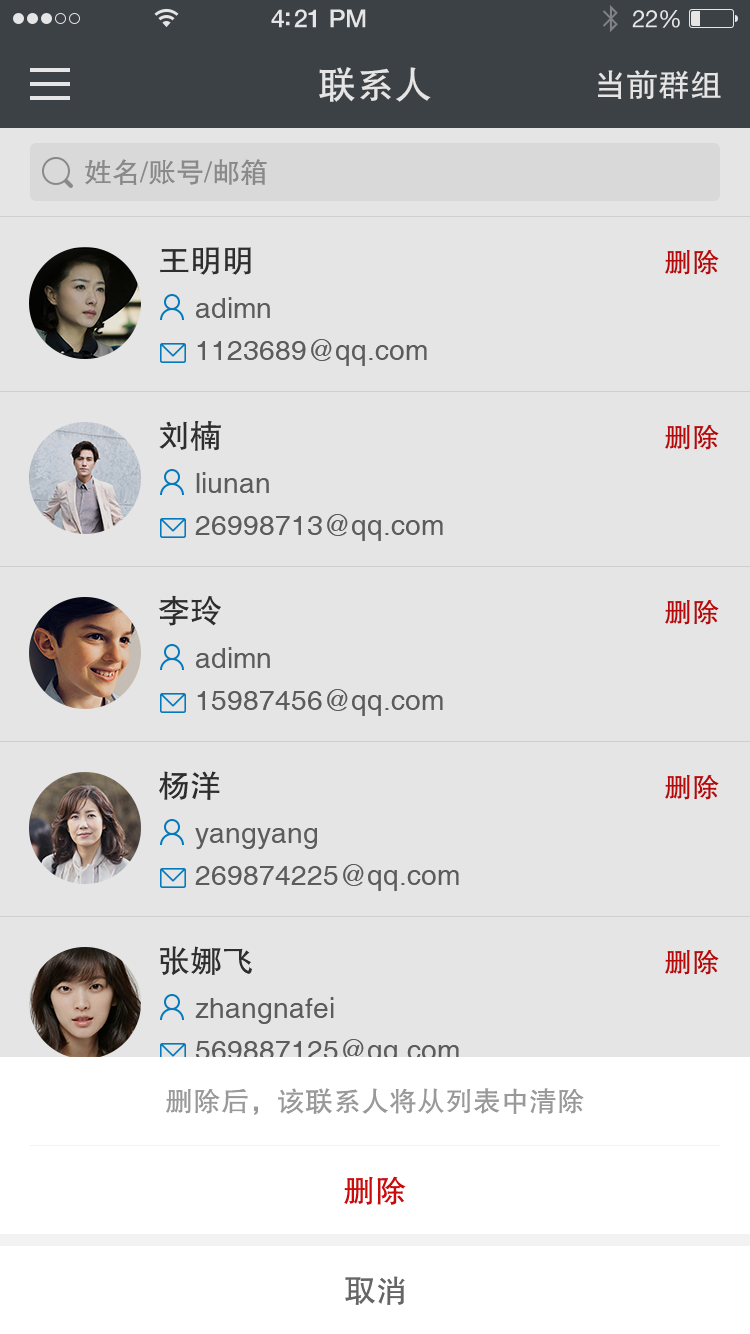
<style>
.page{position:relative;width:750px;height:1334px;background:#e5e5e5}
.page>*{position:absolute;margin:0}
.t1{font:38px "FZHTJW--GB1-0";color:#e5e5e5}
.t2{font:32px "FZHTJW--GB1-0";color:#e5e5e5}
.t3{font:28px "FZHTJW--GB1-0";color:#999999}
.t4{font:32px "FZHTJW--GB1-0";color:#333333}
.t5{font:28px "FZHTJW--GB1-0";color:#cc0a0a}
.t6{font:28px "Helvetica";color:#666666}
.t7{font:32px "FZHTJW--GB1-0";color:#cc0a0a}
.t8{font:32px "FZHTJW--GB1-0";color:#666666}
</style>
<div class="page">
<p class="t1" style="left:319px;top:67px;width:112px;height:35px">联系人</p>
<p class="t2" style="left:598px;top:70px;width:123px;height:29px">当前群组</p>
<p class="t3" style="left:85px;top:159px;width:182px;height:26px">姓名/账号/邮箱</p>
<p class="t4" style="left:160px;top:247px;width:91px;height:28px">王明明</p>
<p class="t5" style="left:665px;top:249px;width:54px;height:26px">删除</p>
<p class="t6" style="left:196px;top:297px;width:74px;height:21px">adimn</p>
<p class="t6" style="left:197px;top:339px;width:230px;height:27px">1123689@qq.com</p>
<p class="t4" style="left:159px;top:421px;width:62px;height:30px">刘楠</p>
<p class="t5" style="left:665px;top:424px;width:54px;height:26px">删除</p>
<p class="t6" style="left:196px;top:472px;width:73px;height:21px">liunan</p>
<p class="t6" style="left:195px;top:514px;width:248px;height:27px">26998713@qq.com</p>
<p class="t4" style="left:158px;top:595px;width:63px;height:31px">李玲</p>
<p class="t5" style="left:665px;top:599px;width:54px;height:26px">删除</p>
<p class="t6" style="left:196px;top:647px;width:74px;height:21px">adimn</p>
<p class="t6" style="left:197px;top:689px;width:246px;height:27px">15987456@qq.com</p>
<p class="t4" style="left:159px;top:771px;width:61px;height:29px">杨洋</p>
<p class="t5" style="left:665px;top:774px;width:54px;height:26px">删除</p>
<p class="t6" style="left:195px;top:828px;width:122px;height:22px">yangyang</p>
<p class="t6" style="left:195px;top:864px;width:264px;height:27px">269874225@qq.com</p>
<p class="t4" style="left:160px;top:946px;width:92px;height:29px">张娜飞</p>
<p class="t5" style="left:665px;top:949px;width:54px;height:26px">删除</p>
<p class="t6" style="left:195px;top:997px;width:139px;height:27px">zhangnafei</p>
<p class="t6" style="left:195px;top:1039px;width:264px;height:27px">569887125@qq.com</p>
<p class="t3" style="left:166px;top:1088px;width:418px;height:27px">删除后，该联系人将从列表中清除</p>
<p class="t7" style="left:344px;top:1176px;width:62px;height:29px">删除</p>
<p class="t8" style="left:345px;top:1276px;width:60px;height:29px">取消</p>
</div>
